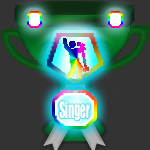
<style>
.page{position:relative;width:150px;height:150px;background:#333333}
.page>*{position:absolute;margin:0}
.t1{font:20.9px "Impact";color:#fefffe;scale:0.55 1}
</style>
<div class="page">
<p class="t1" style="left:59px;top:101px;width:31px;height:20px">Singer</p>
</div>
